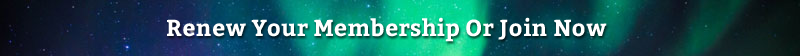
<style>
.page{position:relative;width:800px;height:56px}
.page>*{position:absolute;margin:0}
.t1{font:23px "Bitter-Bold";letter-spacing:0.018em;color:#ffffff}
</style>
<div class="page">
<p class="t1" style="left:167px;top:17px;width:440px;height:25px">Renew Your Membership Or Join Now</p>
</div>
